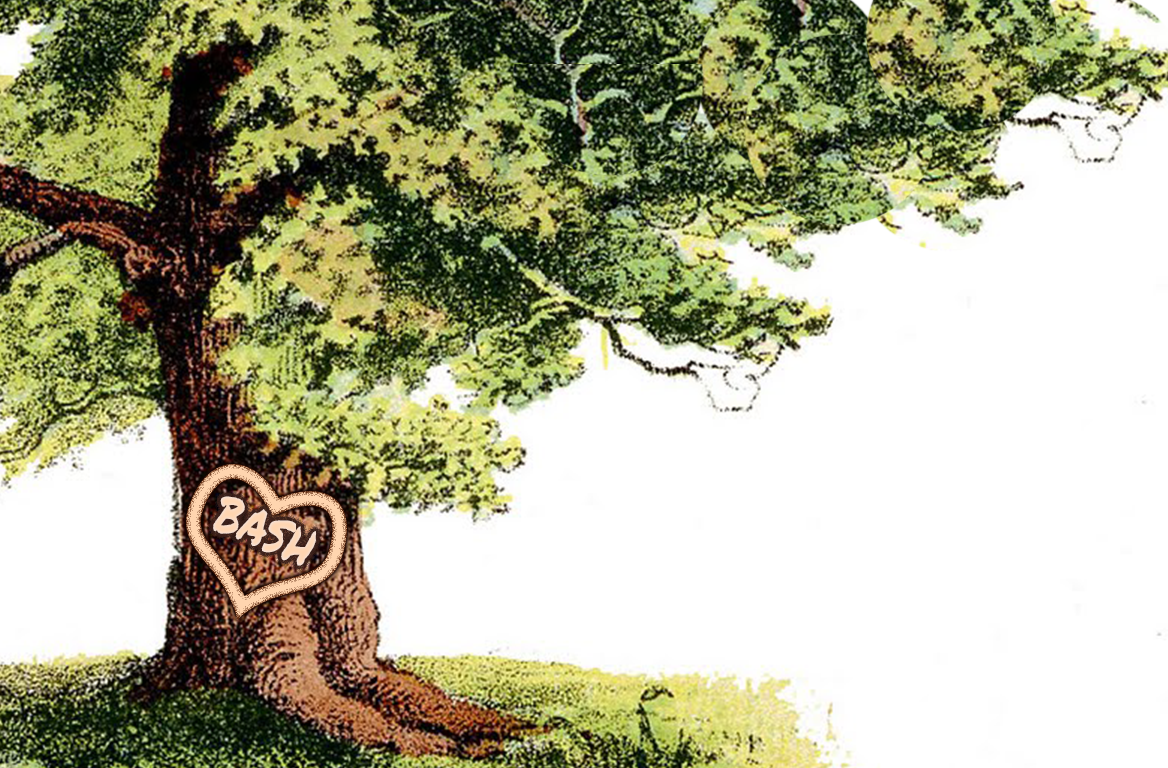
<style>
.page{position:relative;width:1168px;height:768px;background:#ffffff}
.page>*{position:absolute;margin:0}
.t1{font:52.4px "PermanentMarker";color:#ffd5af;scale:0.75 1}
</style>
<div class="page">
<p class="t1" style="left:213px;top:496px;width:103px;height:70px;rotate:23deg">BASH</p>
</div>
